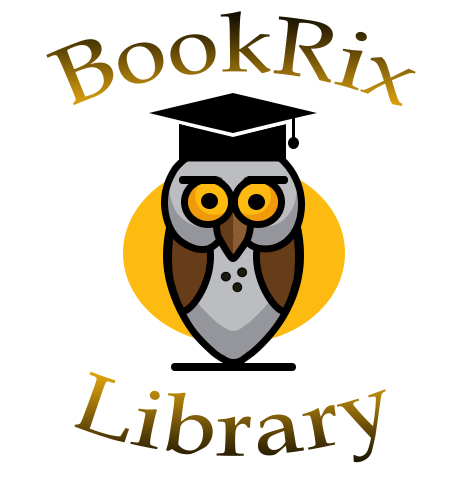
<style>
.page{position:relative;width:460px;height:480px;background:#ffffff}
.page>*{position:absolute;margin:0}
.t1{font:83.3px "BookAntiqua"}
</style>
<div class="page">
<p class="t1" style="left:46px;top:11px;width:370px;height:96px">BookRix</p>
<p class="t1" style="left:74px;top:371px;width:312px;height:92px">Library</p>
</div>
